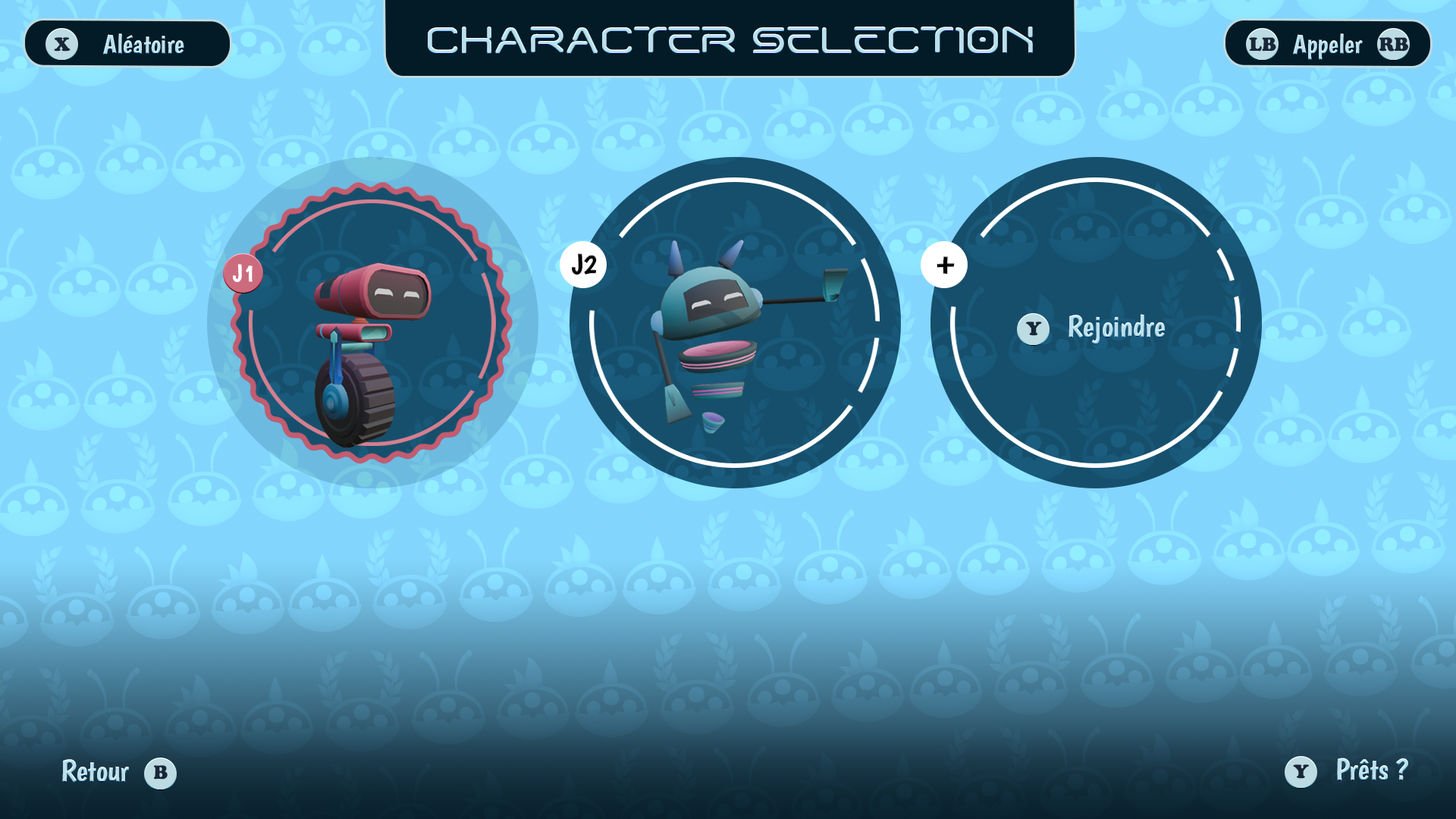
<style>
.page{position:relative;width:1456px;height:819px}
.page>*{position:absolute;margin:0}
.t1{font:34.1px "BeepBoop-Bold";color:#bcdfed}
.t2{font:19.8px "CooperBlack";color:#182738}
.t3{font:26.5px "Boogaloo-Regular";color:#bcdfed}
.t4{font:28.8px "Boogaloo-Regular";color:#000000}
.t5{font:24.5px "Boogaloo-Regular";color:#ffffff}
.t6{font:30.3px "Boogaloo-Regular";color:#bcdfed}
</style>
<div class="page">
<p class="t1" style="left:428px;top:27px;width:605px;height:27px">CHARACTER SELECTION</p>
<p class="t2" style="left:54px;top:37px;width:17px;height:15px">X</p>
<p class="t3" style="left:103px;top:33px;width:81px;height:22px">Aléatoire</p>
<p class="t2" style="left:1249px;top:37px;width:27px;height:15px">LB</p>
<p class="t3" style="left:1293px;top:33px;width:70px;height:27px">Appeler</p>
<p class="t2" style="left:1379px;top:37px;width:29px;height:15px">RB</p>
<p class="t4" style="left:572px;top:253px;width:25px;height:22px">J2</p>
<p class="t4" style="left:937px;top:256px;width:18px;height:18px">+</p>
<p class="t5" style="left:233px;top:264px;width:20px;height:18px">J1</p>
<p class="t6" style="left:1068px;top:314px;width:97px;height:30px">Rejoindre</p>
<p class="t2" style="left:1026px;top:322px;width:16px;height:14px">Y</p>
<p class="t6" style="left:62px;top:759px;width:68px;height:24px">Retour</p>
<p class="t6" style="left:1337px;top:758px;width:71px;height:23px">Prêts ?</p>
<p class="t2" style="left:154px;top:765px;width:14px;height:15px">B</p>
<p class="t2" style="left:1293px;top:764px;width:16px;height:15px">Y</p>
</div>
